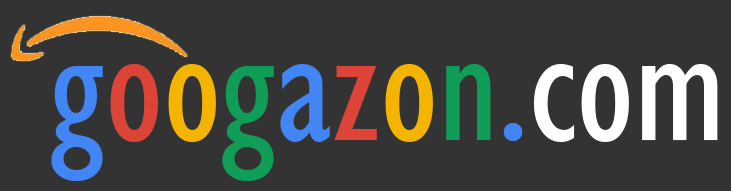
<style>
.page{position:relative;width:731px;height:191px;background:#333333}
.page>*{position:absolute;margin:0}
.t1{font:167.6px "GillSansMT-Condensed";color:#ffffff}
.t2{font:167.6px "GillSansMT-Condensed";color:#4285f4}
.t3{font:167.6px "GillSansMT-Condensed";color:#db4437}
.t4{font:167.6px "GillSansMT-Condensed";color:#f4b400}
.t5{font:167.6px "GillSansMT-Condensed";color:#0f9d58}
</style>
<div class="page">
<p class="t1" style="left:51px;top:64px;width:667px;height:117px"><span class="t2">g</span><span class="t3">o</span><span class="t4">o</span><span class="t5">g</span><span class="t2">a</span><span class="t3">z</span><span class="t4">o</span><span class="t5">n</span><span class="t2">.</span>com</p>
</div>
